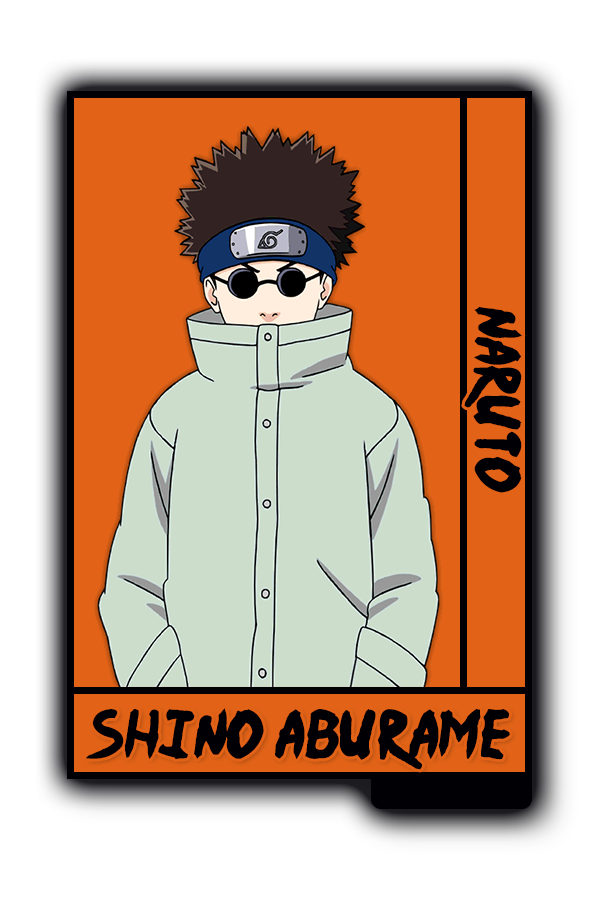
<style>
.page{position:relative;width:600px;height:900px;background:#e26317}
.page>*{position:absolute;margin:0}
.t1{font:52px "Ninja-Naruto";color:#010005}
.t2{font:55.4px "Ninja-Naruto";color:#010005}
</style>
<div class="page">
<p class="t1" style="left:464px;top:307px;width:59px;height:186px;rotate:90deg">Naruto</p>
<p class="t2" style="left:85px;top:708px;width:425px;height:62px">Shino Aburame</p>
</div>
